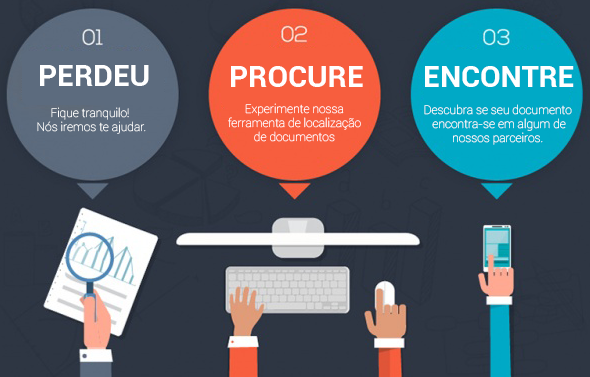
<style>
.page{position:relative;width:590px;height:377px;background:#2e3643}
.page>*{position:absolute;margin:0}
.t1{font:30px "Roboto-Bold";color:#ffffff}
.t2{font:12px/14px "Roboto-Thin";color:#ffffff}
</style>
<div class="page">
<p class="t1" style="left:40px;top:65px;width:109px;height:21px">PERDEU</p>
<p class="t1" style="left:231px;top:66px;width:132px;height:21px">PROCURE</p>
<p class="t1" style="left:425px;top:66px;width:149px;height:21px">ENCONTRE</p>
<p class="t2" style="left:37px;top:107px;width:109px;height:27px;text-align:center">Fique tranquilo! <br>Nós iremos te ajudar.</p>
<p class="t2" style="left:228px;top:103px;width:133px;height:39px;text-align:center">Experimente nossa <br>ferramenta de localização<br>de documentos</p>
<p class="t2" style="left:424px;top:104px;width:148px;height:41px;text-align:center">Descubra se seu documento <br>encontra-se em algum de<br>nossos parceiros.</p>
</div>
